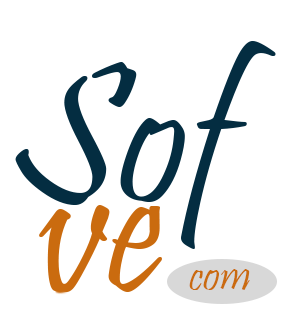
<style>
.page{position:relative;width:288px;height:322px;background:#ffffff}
.page>*{position:absolute;margin:0}
.t1{font:200px "Pristina-Regular";color:#042d41}
.t2{font:48px "Pristina-Regular";color:#ca6b0f}
</style>
<div class="page">
<p class="t1" style="left:15px;top:40px;width:261px;height:209px">Sof</p>
<p class="t2" style="left:189px;top:269px;width:61px;height:21px">com</p>
</div>
